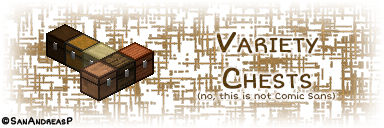
<style>
.page{position:relative;width:384px;height:128px;background:#ffffff}
.page>*{position:absolute;margin:0}
.t1{font:9px "ShortStack";color:#5c3c11}
.t2{font:30px "ShortStack";color:#5c3c11;font-variant:small-caps;font-weight:bold}
.t3{font:10px "ShortStack";color:#000000;font-variant:small-caps;font-weight:bold}
</style>
<div class="page">
<p class="t1" style="left:197px;top:32px;width:138px;height:69px;text-align:center"><span class="t2">Variety<br>Chests<br></span>(no, this is not Comic Sans)</p>
<p class="t3" style="left:1px;top:117px;width:72px;height:8px">©SanAndreasP</p>
</div>
